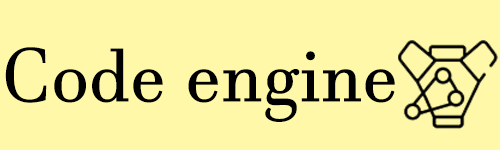
<style>
.page{position:relative;width:500px;height:150px;background:#fff8a8}
.page>*{position:absolute;margin:0}
.t1{font:74.5px "JavaneseText";color:#000000}
</style>
<div class="page">
<p class="t1" style="left:5px;top:47px;width:390px;height:75px">Code engine</p>
</div>
